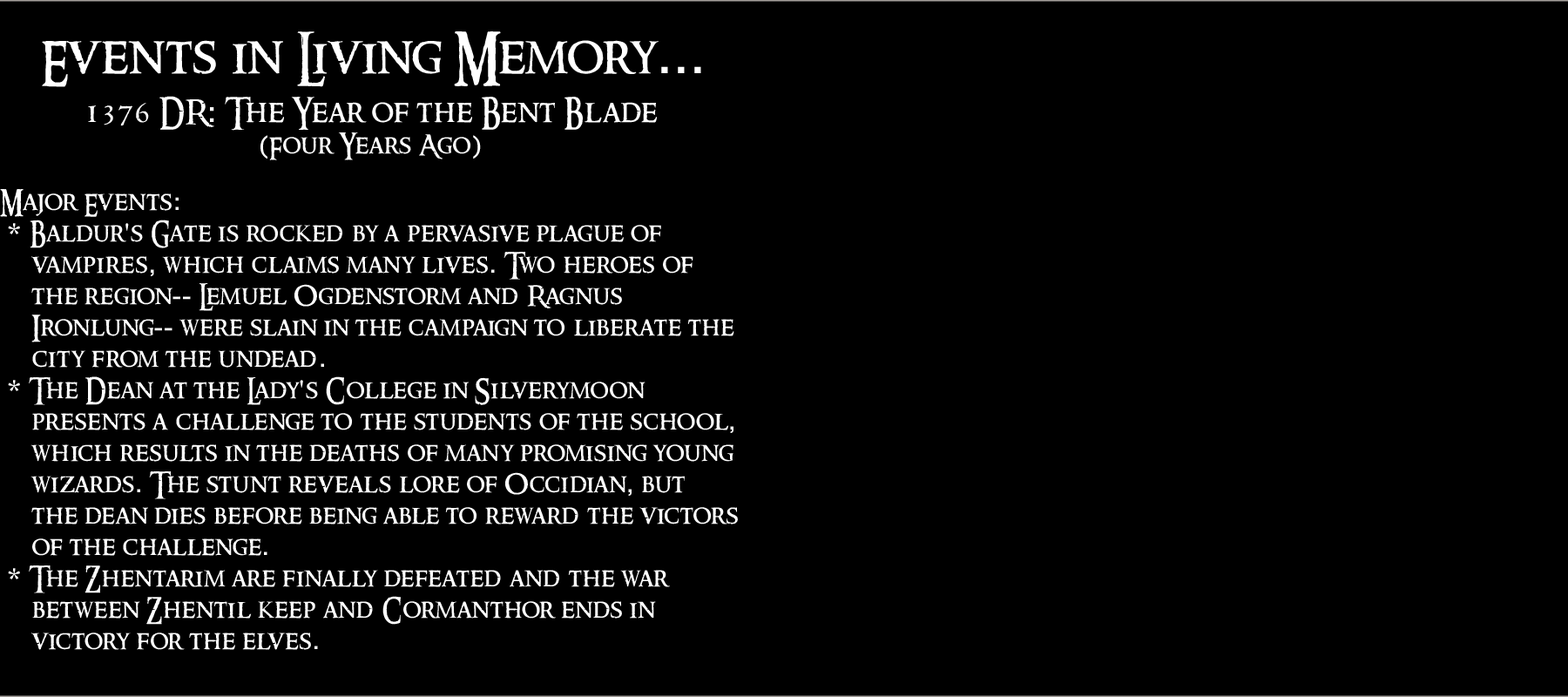
<style>
.page{position:relative;width:1568px;height:697px;background:#000000}
.page>*{position:absolute;margin:0}
.t1{font:26.1px "RingbearerMedium";letter-spacing:0.025em;color:#ffffff}
.t2{font:15.7px "RingbearerMedium";letter-spacing:0.025em;color:#ffffff}
.t3{font:52.3px "RingbearerMedium";letter-spacing:0.025em;color:#ffffff}
.t4{font:52.3px "Rockwell";letter-spacing:0.025em;color:#ffffff}
.t5{font:31.4px "RingbearerMedium";letter-spacing:0.025em;color:#ffffff}
.t6{font:31.4px "Rockwell";letter-spacing:0.025em;color:#ffffff}
.t7{font:26.1px "Rockwell";letter-spacing:0.025em;color:#ffffff}
</style>
<div class="page">
<p class="t1" style="left:0px;top:31px;width:738px;height:619px;text-align:center"><span class="t2"><br></span><span class="t3">Events in Living Memory</span><span class="t4">...<br><br></span><span class="t5">1376 DR</span><span class="t6">:</span><span class="t5"> The Year of the Bent Blade<br></span><span class="t7">(</span>Four Years Ago<span class="t7">)<br><br></span>Major Events<span class="t7">:<br> * </span>Baldur<span class="t7">'</span>s Gate is rocked by a pervasive plague of <br> vampires<span class="t7">,</span> which claims many lives<span class="t7">.</span> Two heroes of <br> the region<span class="t7">--</span> Lemuel Ogdenstorm and Ragnus <br> Ironlung<span class="t7">--</span> were slain in the campaign to liberate the <br> city from the undead<span class="t7">.<br> * </span>The Dean at the Lady<span class="t7">'</span>s College in Silverymoon <br> presents a challenge to the students of the school<span class="t7">,</span> <br> which results in the deaths of many promising young <br> wizards<span class="t7">.</span> The stunt reveals lore of Occidian<span class="t7">,</span> but <br> the dean dies before being able to reward the victors <br> of the challenge<span class="t7">.<br> * </span>The Zhentarim are finally defeated and the war <br> between Zhentil keep and Cormanthor ends in <br> victory for the elves<span class="t7">.</span></p>
</div>
